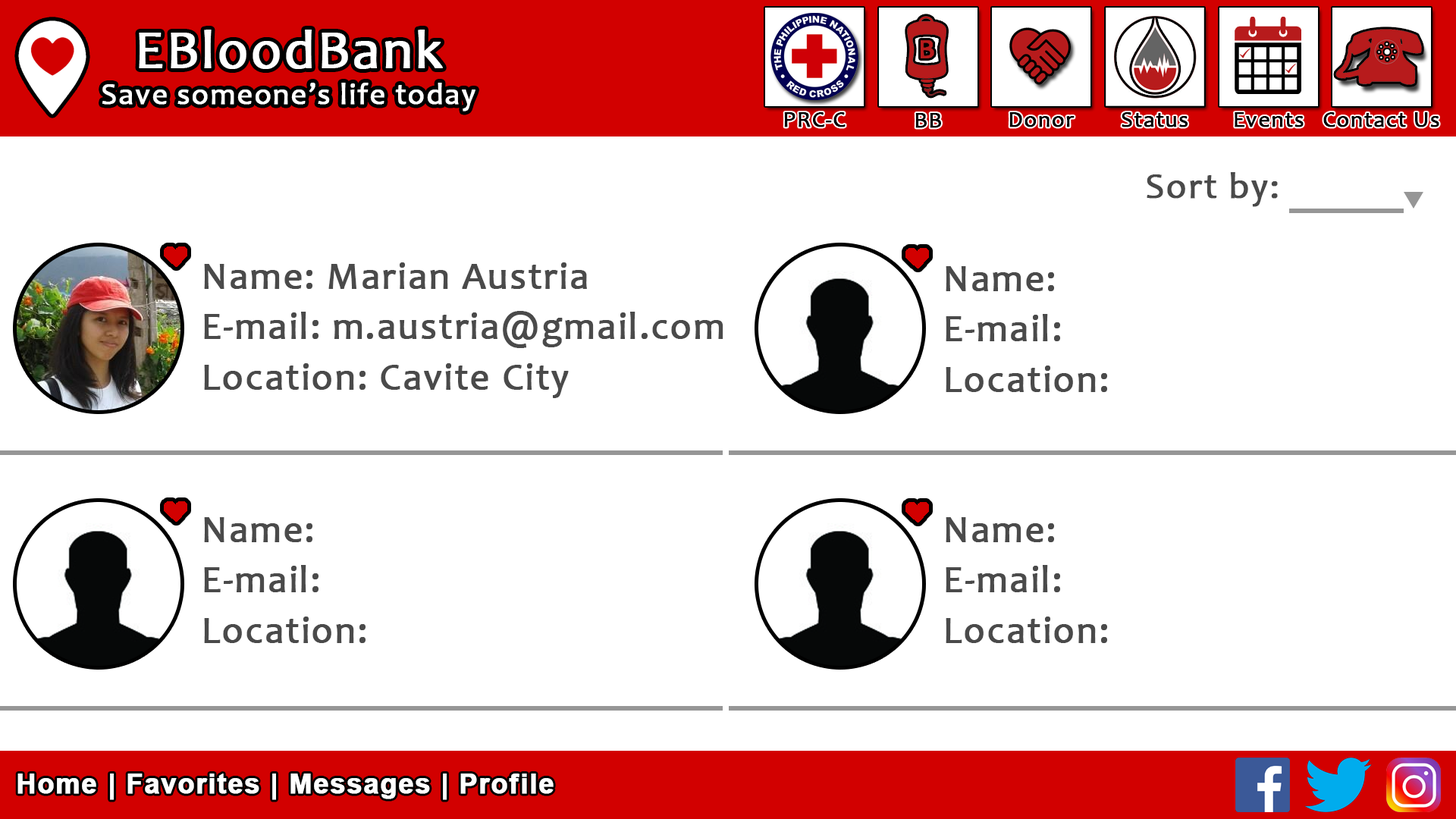
<style>
.page{position:relative;width:1456px;height:819px;background:#ffffff}
.page>*{position:absolute;margin:0}
.t1{font:30.3px "Candara";letter-spacing:0.03em;color:#ffffff;font-weight:bold}
.t2{font:54.6px "Candara";letter-spacing:0.03em;color:#ffffff;font-weight:bold}
.t3{font:22.7px "Candara";letter-spacing:0.03em;color:#000000;font-weight:bold}
.t4{font:36.4px "Candara";letter-spacing:0.03em;color:#4a4a4a;font-weight:bold}
.t5{font:37.9px "Candara";letter-spacing:0.03em;color:#4a4a4a;font-weight:bold}
.t6{font:27.3px "Arial-BoldMT";letter-spacing:0.03em;color:#ffffff;font-weight:bold}
</style>
<div class="page">
<p class="t1" style="left:102px;top:30px;width:373px;height:81px;text-align:center"><span class="t2">EBloodBank<br></span>Save someone’s life today</p>
<p class="t3" style="left:784px;top:112px;width:62px;height:15px">PRC-C</p>
<p class="t3" style="left:915px;top:113px;width:26px;height:15px">BB</p>
<p class="t3" style="left:1009px;top:112px;width:66px;height:15px">Donor</p>
<p class="t3" style="left:1122px;top:112px;width:66px;height:15px">Status</p>
<p class="t3" style="left:1235px;top:112px;width:69px;height:15px">Events</p>
<p class="t3" style="left:1323px;top:112px;width:116px;height:15px">Contact Us</p>
<p class="t4" style="left:1147px;top:172px;width:131px;height:35px">Sort by:</p>
<p class="t5" style="left:204px;top:262px;width:383px;height:27px">Name: Marian Austria</p>
<p class="t5" style="left:946px;top:266px;width:108px;height:25px">Name:</p>
<p class="t5" style="left:204px;top:311px;width:519px;height:37px">E-mail: m.austria@gmail.com</p>
<p class="t5" style="left:946px;top:314px;width:114px;height:27px">E-mail:</p>
<p class="t5" style="left:204px;top:363px;width:365px;height:35px">Location: Cavite City</p>
<p class="t5" style="left:946px;top:366px;width:161px;height:26px">Location:</p>
<p class="t5" style="left:204px;top:517px;width:108px;height:25px">Name:</p>
<p class="t5" style="left:946px;top:517px;width:108px;height:25px">Name:</p>
<p class="t5" style="left:204px;top:565px;width:114px;height:27px">E-mail:</p>
<p class="t5" style="left:946px;top:565px;width:114px;height:27px">E-mail:</p>
<p class="t5" style="left:204px;top:617px;width:162px;height:26px">Location:</p>
<p class="t5" style="left:946px;top:617px;width:161px;height:26px">Location:</p>
<p class="t6" style="left:17px;top:773px;width:537px;height:27px">Home | Favorites | Messages | Profile</p>
</div>
